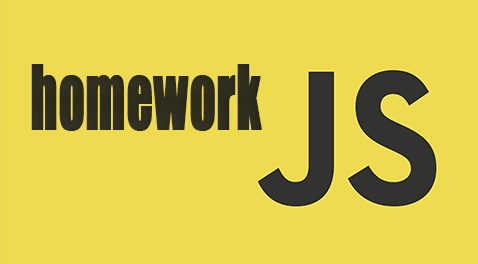
<style>
.page{position:relative;width:478px;height:264px;background:#eedb50}
.page>*{position:absolute;margin:0}
.t1{font:81.7px "Impact";color:#323230;font-weight:bold;scale:0.62 1}
</style>
<div class="page">
<p class="t1" style="left:31px;top:64px;width:231px;height:67px;opacity:0.95">homework</p>
</div>
